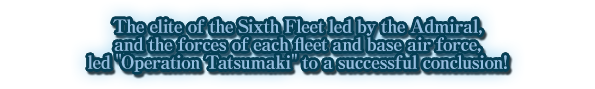
<style>
.page{position:relative;width:595px;height:89px;background:#ffffff}
.page>*{position:absolute;margin:0}
.t1{font:18px/18px "RyuminPro-ExBold";letter-spacing:-0.04em;color:#93bee0}
</style>
<div class="page">
<p class="t1" style="left:88px;top:19px;width:419px;height:53px;text-align:center">The elite of the Sixth Fleet led by the Admiral,<br>and the forces of each fleet and base air force,<br>led "Operation Tatsumaki" to a successful conclusion!</p>
</div>
